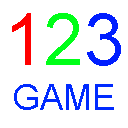
<style>
.page{position:relative;width:128px;height:128px;background:#ffffff}
.page>*{position:absolute;margin:0}
.t1{font:72px "ArialMT";color:#ff0000}
.t2{font:72px "ArialMT";color:#00ff18}
.t3{font:72px "ArialMT";color:#001eff}
.t4{font:36px "ArialMT";color:#002aff}
</style>
<div class="page">
<p class="t1" style="left:12px;top:13px;width:109px;height:53px">1<span class="t2">2</span><span class="t3">3</span></p>
<p class="t4" style="left:14px;top:84px;width:100px;height:26px">GAME</p>
</div>
